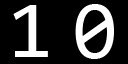
<style>
.page{position:relative;width:128px;height:64px;background:#000000}
.page>*{position:absolute;margin:0}
.t1{font:82.5px "Consolas";color:#ffffff}
.t2{font:83.1px "Consolas";color:#ffffff}
</style>
<div class="page">
<p class="t1" style="left:13px;top:5px;width:35px;height:52px">1</p>
<p class="t2" style="left:75px;top:4px;width:39px;height:55px">0</p>
</div>
